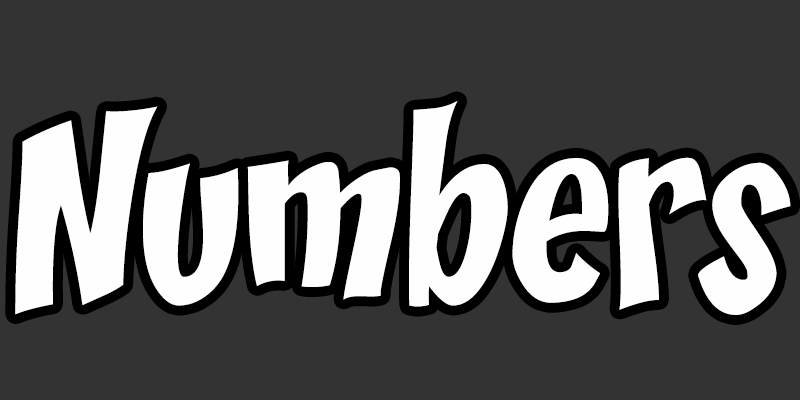
<style>
.page{position:relative;width:800px;height:400px;background:#333333}
.page>*{position:absolute;margin:0}
.t1{font:237.4px "Yikes";color:#fefefe}
</style>
<div class="page">
<p class="t1" style="left:15px;top:101px;width:776px;height:214px">Numbers</p>
</div>
